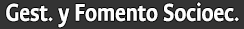
<style>
.page{position:relative;width:244px;height:29px;background:#333333}
.page>*{position:absolute;margin:0}
.t1{font:27.1px "AncizarSans-Bold";color:#fcfcfc;scale:0.86 1}
</style>
<div class="page">
<p class="t1" style="left:6px;top:2px;width:233px;height:26px">Gest. y Fomento Socioec.</p>
</div>
